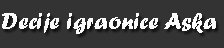
<style>
.page{position:relative;width:224px;height:48px;background:#333333}
.page>*{position:absolute;margin:0}
.t1{font:24px "ForteMT";color:#fafafa}
</style>
<div class="page">
<p class="t1" style="left:2px;top:13px;width:214px;height:21px">Decije igraonice Aska</p>
</div>
